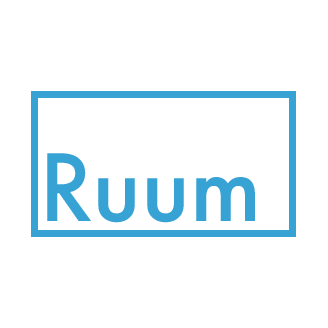
<style>
.page{position:relative;width:328px;height:328px;background:#ffffff}
.page>*{position:absolute;margin:0}
.t1{font:90px "Futura-Medium";color:#37a2d4}
</style>
<div class="page">
<p class="t1" style="left:47px;top:153px;width:208px;height:70px">Ruum</p>
</div>
